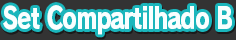
<style>
.page{position:relative;width:236px;height:40px;background:#333333}
.page>*{position:absolute;margin:0}
.t1{font:29.4px "RodinPro-EB";letter-spacing:-0.053em;color:#f9ffff;scale:0.78 1}
</style>
<div class="page">
<p class="t1" style="left:3px;top:5px;width:229px;height:30px">Set Compartilhado B</p>
</div>
